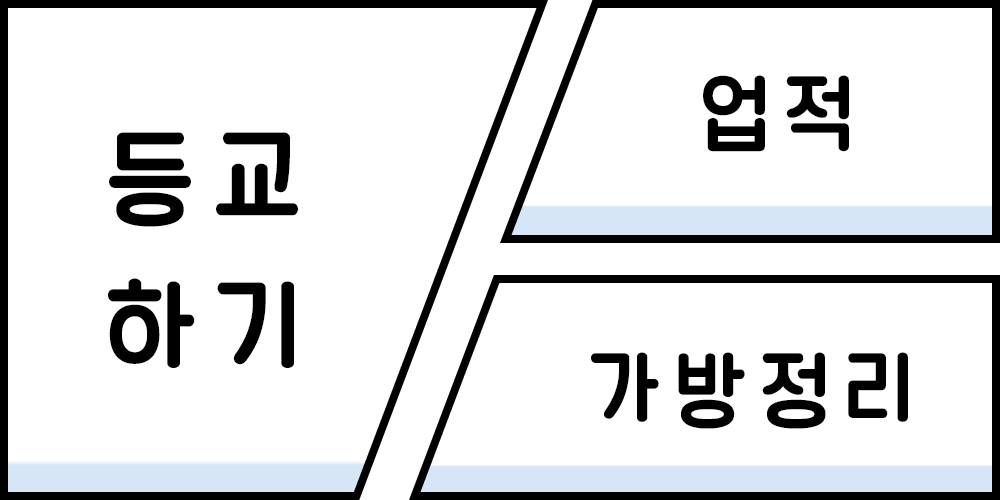
<style>
.page{position:relative;width:1000px;height:500px;background:#ffffff}
.page>*{position:absolute;margin:0}
.t1{font:80px "TTAppgulimR";letter-spacing:0.2em;color:#000000}
.t2{font:100px/150px "TTAppgulimR";letter-spacing:0.2em;color:#000000}
</style>
<div class="page">
<p class="t1" style="left:703px;top:75px;width:146px;height:77px">업적</p>
<p class="t2" style="left:108px;top:132px;width:190px;height:236px">등교<br>하기</p>
<p class="t1" style="left:591px;top:352px;width:317px;height:77px">가방정리</p>
</div>
